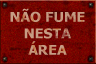
<style>
.page{position:relative;width:96px;height:64px}
.page>*{position:absolute;margin:0}
.t1{font:13.5px/16.5px "Tahoma-Bold";color:#c69c84;text-transform:uppercase;scale:1.05 1}
</style>
<div class="page">
<p class="t1" style="left:10px;top:8px;width:75px;height:47px;text-align:center">NÃO FUME<br>NESTA<br>ÁREA</p>
</div>
